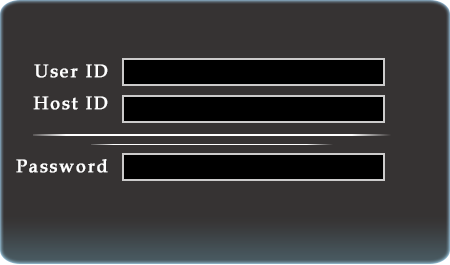
<style>
.page{position:relative;width:450px;height:265px;background:#363333}
.page>*{position:absolute;margin:0}
.t1{font:18px "BookAntiqua";letter-spacing:0.08em;color:#ffffff;font-weight:bold}
</style>
<div class="page">
<p class="t1" style="left:16px;top:64px;width:92px;height:109px;text-align:right">User ID<br>Host ID<br><br>Password</p>
</div>
